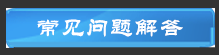
<style>
.page{position:relative;width:219px;height:55px;background:#333333}
.page>*{position:absolute;margin:0}
.t1{font:24px "STLiti";letter-spacing:0.025em;color:#ffffff}
</style>
<div class="page">
<p class="t1" style="left:37px;top:19px;width:146px;height:18px">常见问题解答</p>
</div>
